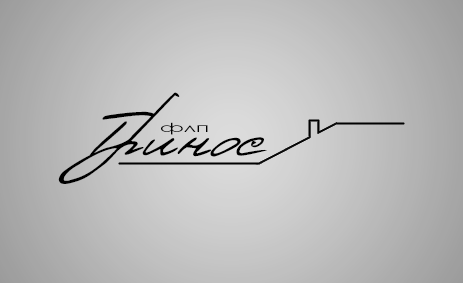
<style>
.page{position:relative;width:463px;height:283px}
.page>*{position:absolute;margin:0}
.t1{font:72px "Denistina";color:#000000}
.t2{font:12.6px "CenturyGothic";color:#000000;scale:1.75 1}
</style>
<div class="page">
<p class="t1" style="left:58px;top:92px;width:209px;height:92px">Тринос</p>
<p class="t2" style="left:161px;top:122px;width:47px;height:13px">флп</p>
</div>
